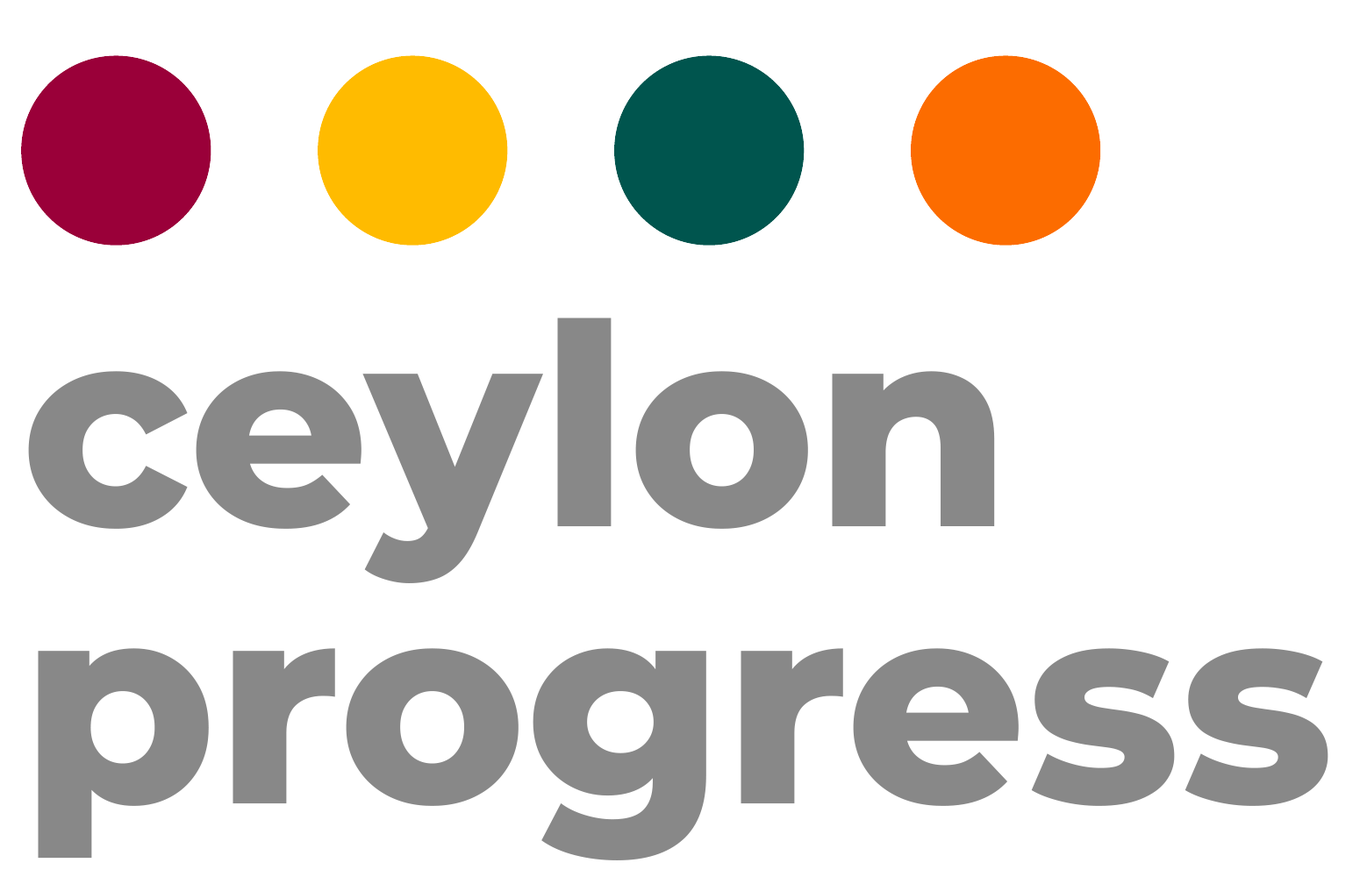
<style>
.page{position:relative;width:1360px;height:877px;background:#ffffff}
.page>*{position:absolute;margin:0}
.t1{font:280.7px/277.2px "MontserratRoman-ExtraBold";color:#888888}
</style>
<div class="page">
<p class="t1" style="left:28px;top:318px;width:1300px;height:542px">ceylon<br>progress</p>
</div>
